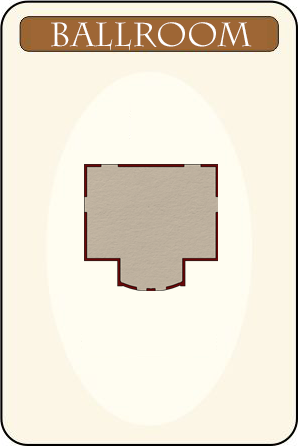
<style>
.page{position:relative;width:298px;height:446px;background:#fcf6e6}
.page>*{position:absolute;margin:0}
.t1{font:33.3px "CharlemagneStd-Regular";color:#ffffff}
</style>
<div class="page">
<p class="t1" style="left:51px;top:22px;width:201px;height:29px">Ballroom</p>
</div>
